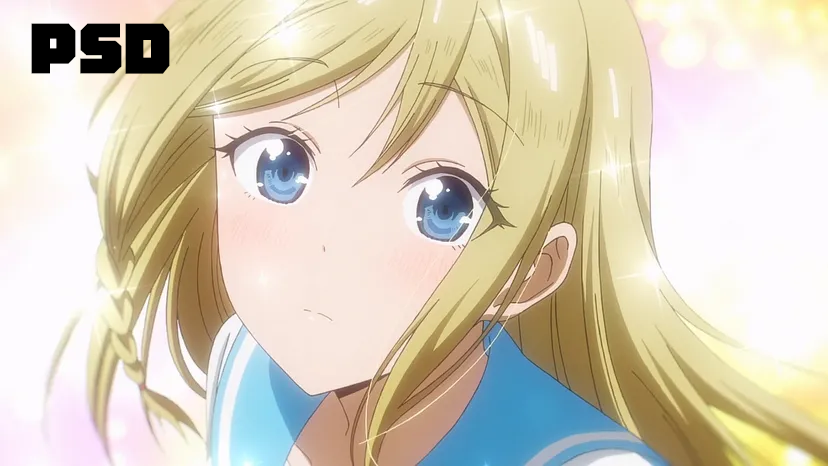
<style>
.page{position:relative;width:828px;height:466px}
.page>*{position:absolute;margin:0}
.t1{font:60px "burnfont-1.3-Black";color:#000000}
.t2{font:48px "burnfont-1.3-Black";color:#000000}
</style>
<div class="page">
<p class="t1" style="left:31px;top:23px;width:139px;height:51px"><span class="t2"> </span>PSD</p>
</div>
